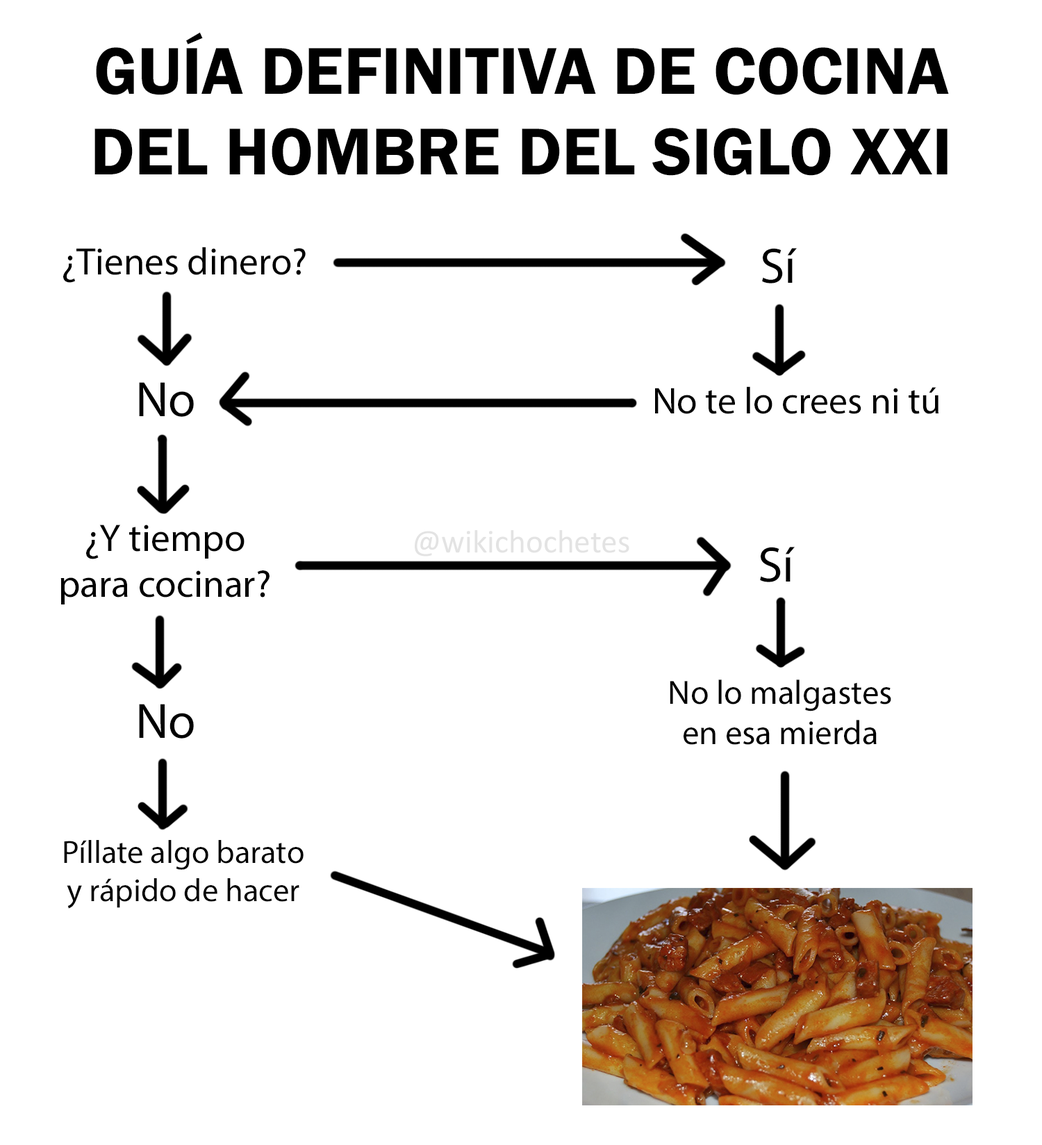
<style>
.page{position:relative;width:1042px;height:1145px;background:#ffffff}
.page>*{position:absolute;margin:0}
.t1{font:68.4px "FranklinGothic-Demi";color:#000000}
.t2{font:38.4px "MyriadPro-Regular";color:#000000}
.t3{font:50px "MyriadPro-Regular";color:#000000}
.t4{font:37.4px "MyriadPro-Regular";color:#000000}
.t5{font:38.6px "MyriadPro-Regular";color:#000000}
.t6{font:32.8px "Calibri";color:#e3e3e3}
.t7{font:33.9px "MyriadPro-Regular";color:#000000}
.t8{font:32.3px "MyriadPro-Regular";color:#000000}
</style>
<div class="page">
<p class="t1" style="left:94px;top:32px;width:855px;height:144px;text-align:center">GUÍA DEFINITIVA DE COCINA<br>DEL HOMBRE DEL SIGLO XXI</p>
<p class="t2" style="left:63px;top:247px;width:243px;height:36px">¿Tienes dinero?</p>
<p class="t3" style="left:762px;top:248px;width:35px;height:35px">Sí</p>
<p class="t3" style="left:139px;top:382px;width:55px;height:35px">No</p>
<p class="t4" style="left:655px;top:386px;width:283px;height:28px">No te lo crees ni tú</p>
<p class="t5" style="left:60px;top:524px;width:209px;height:80px;text-align:center">¿Y tiempo<br>para cocinar?</p>
<p class="t6" style="left:415px;top:530px;width:214px;height:26px">@wikichochetes</p>
<p class="t3" style="left:760px;top:547px;width:35px;height:35px">Sí</p>
<p class="t7" style="left:670px;top:679px;width:221px;height:66px;text-align:center">No lo malgastes<br>en esa mierda</p>
<p class="t3" style="left:139px;top:704px;width:55px;height:34px">No</p>
<p class="t8" style="left:64px;top:840px;width:240px;height:68px;text-align:center">Píllate algo barato<br>y rápido de hacer</p>
</div>
